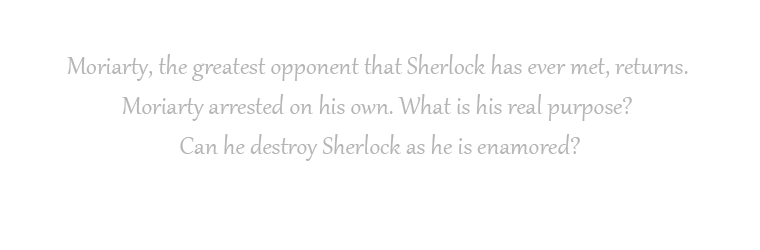
<style>
.page{position:relative;width:760px;height:250px;background:#ffffff}
.page>*{position:absolute;margin:0}
.t1{font:30px/40px "Gabriola";color:#b5b5b5}
</style>
<div class="page">
<p class="t1" style="left:67px;top:54px;width:621px;height:107px;text-align:center">Moriarty, the greatest opponent that Sherlock has ever met, returns. <br>Moriarty arrested on his own. What is his real purpose? <br>Can he destroy Sherlock as he is enamored?</p>
</div>
